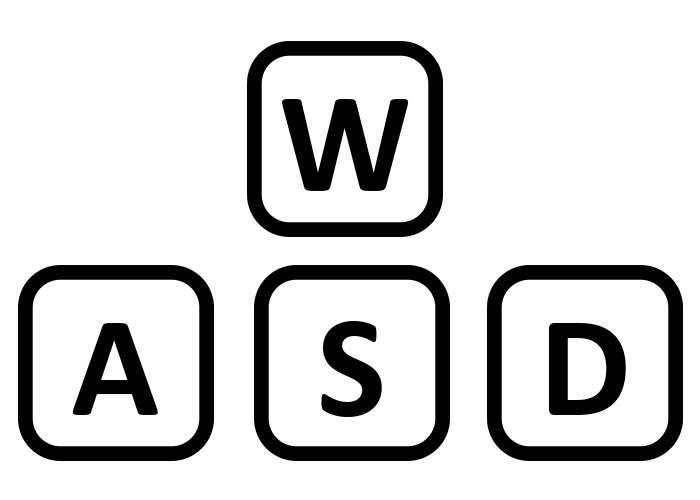
<style>
.page{position:relative;width:700px;height:500px;background:#ffffff}
.page>*{position:absolute;margin:0}
.t1{font:145.6px "Calibri-Bold";color:#000000}
</style>
<div class="page">
<p class="t1" style="left:282px;top:99px;width:127px;height:92px">W</p>
<p class="t1" style="left:72px;top:323px;width:86px;height:92px">A</p>
<p class="t1" style="left:321px;top:321px;width:61px;height:96px">S</p>
<p class="t1" style="left:549px;top:323px;width:77px;height:92px">D</p>
</div>
